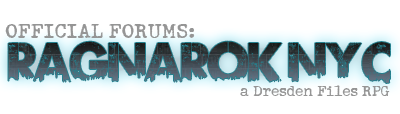
<style>
.page{position:relative;width:400px;height:114px;background:#ffffff}
.page>*{position:absolute;margin:0}
.t1{font:24px "DumbOldTypewriterNormal";color:#959595}
.t2{font:51.8px "UrbanJungleDEMO"}
.t3{font:17.6px "DumbOldTypewriterNormal";color:#959595}
</style>
<div class="page">
<p class="t1" style="left:5px;top:24px;width:190px;height:14px">OFFICIAL FORUMS:</p>
<p class="t2" style="left:8px;top:41px;width:382px;height:42px">Ragnarok NYC</p>
<p class="t3" style="left:240px;top:85px;width:150px;height:11px">a Dresden Files RPG</p>
</div>
